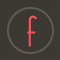
<style>
.page{position:relative;width:60px;height:60px;background:#3c3932}
.page>*{position:absolute;margin:0}
.t1{font:40px "FashionVictim";color:#fc515d}
</style>
<div class="page">
<p class="t1" style="left:27px;top:15px;width:10px;height:32px">f</p>
</div>
